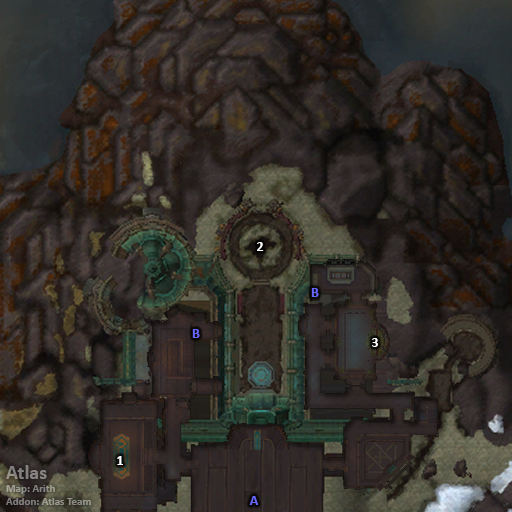
<style>
.page{position:relative;width:512px;height:512px}
.page>*{position:absolute;margin:0}
.t1{font:14px "Calibri-Bold";color:#ffffff}
.t2{font:14px "Calibri-Bold";color:#6666ff}
.t3{font:11px "Calibri-Bold";color:#888483}
.t4{font:20px "Calibri-Bold";color:#888483}
</style>
<div class="page">
<p class="t1" style="left:257px;top:242px;width:7px;height:9px">2</p>
<p class="t2" style="left:311px;top:288px;width:8px;height:9px">B</p>
<p class="t2" style="left:192px;top:329px;width:8px;height:9px">B</p>
<p class="t1" style="left:372px;top:338px;width:6px;height:9px">3</p>
<p class="t1" style="left:117px;top:456px;width:6px;height:9px">1</p>
<p class="t3" style="left:6px;top:465px;width:85px;height:40px"><span class="t4">Atlas<br></span>Map: Arith<br>Addon: Atlas Team</p>
<p class="t2" style="left:249px;top:496px;width:9px;height:9px">A</p>
</div>
